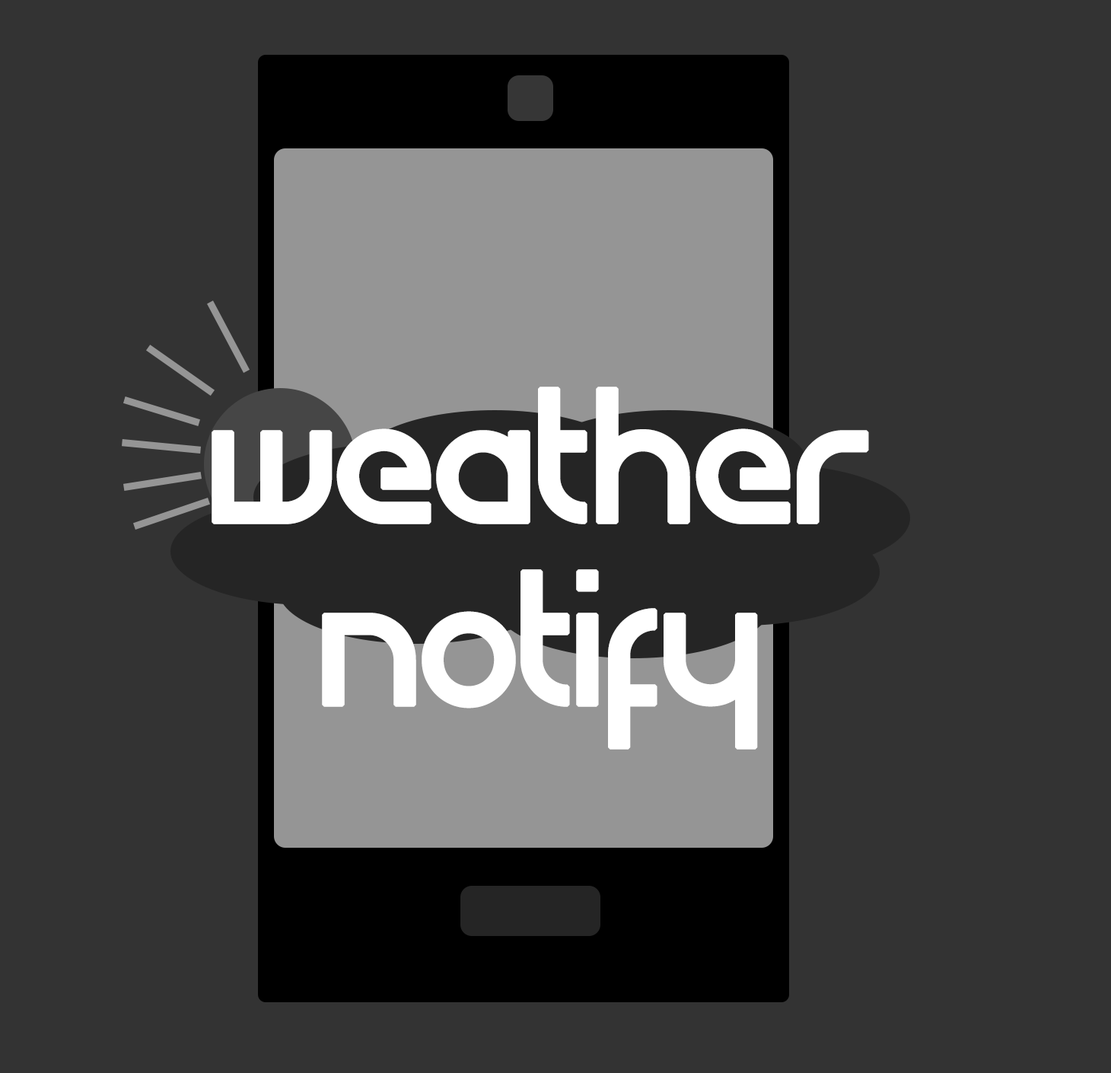
<style>
.page{position:relative;width:1111px;height:1073px;background:#333333}
.page>*{position:absolute;margin:0}
.t1{font:152.2px "Atiba-Regular";color:#ffffff;font-weight:bold}
</style>
<div class="page">
<p class="t1" style="left:212px;top:387px;width:657px;height:363px;text-align:center">weather<br>notify</p>
</div>
